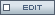
<style>
.page{position:relative;width:55px;height:15px;background:#dce4ec}
.page>*{position:absolute;margin:0}
.t1{font:8px "BitDustTwo";color:#4c617e}
</style>
<div class="page">
<p class="t1" style="left:23px;top:5px;width:19px;height:5px">EDIT</p>
</div>
